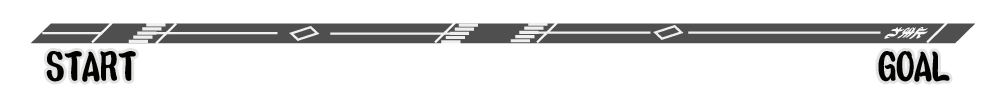
<style>
.page{position:relative;width:1000px;height:100px;background:#ffffff}
.page>*{position:absolute;margin:0}
.t1{font:36px "KantinliuEG-Heavy-SJIS";color:#020300}
</style>
<div class="page">
<p class="t1" style="left:46px;top:51px;width:90px;height:31px">START</p>
<p class="t1" style="left:878px;top:51px;width:72px;height:31px">GOAL</p>
</div>
